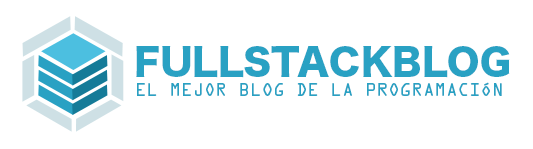
<style>
.page{position:relative;width:533px;height:149px;background:#ffffff}
.page>*{position:absolute;margin:0}
.t1{font:37px "HiraKakuStdN-W8";color:#29a1c3}
.t2{font:16px "OCRAStd";color:#29a1c3}
</style>
<div class="page">
<p class="t1" style="left:136px;top:46px;width:374px;height:32px">FULLSTACKBLOG</p>
<p class="t2" style="left:137px;top:82px;width:365px;height:14px">EL MEJOR BLOG DE LA PROGRAMACIÓN</p>
</div>
